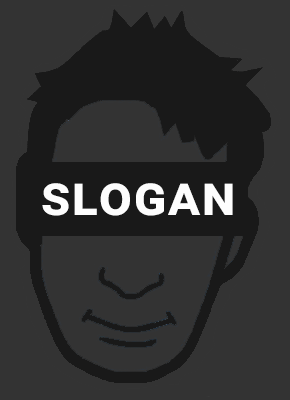
<style>
.page{position:relative;width:290px;height:400px;background:#333333}
.page>*{position:absolute;margin:0}
.t1{font:55px "Roboto-Bold";letter-spacing:0.035em;color:#fdfdfd;font-variant:small-caps}
</style>
<div class="page">
<p class="t1" style="left:42px;top:183px;width:191px;height:33px">slogan</p>
</div>
